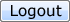
<style>
.page{position:relative;width:70px;height:22px}
.page>*{position:absolute;margin:0}
.t1{font:15.3px "Verdana";color:#000000}
</style>
<div class="page">
<p class="t1" style="left:11px;top:5px;width:51px;height:14px">Logout</p>
</div>
